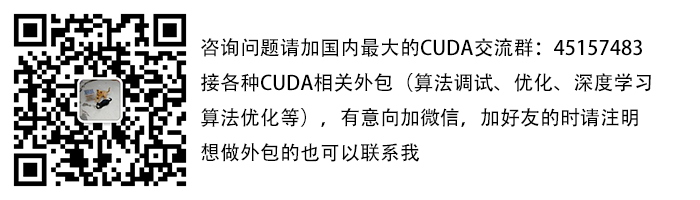
<style>
.page{position:relative;width:700px;height:200px;background:#ffffff}
.page>*{position:absolute;margin:0}
.t1{font:20px "AdobeHeitiStd-Regular";color:#000000}
</style>
<div class="page">
<p class="t1" style="left:201px;top:38px;width:450px;height:124px">咨询问题请加国内最大的CUDA交流群：45157483<br>接各种CUDA相关外包（算法调试、优化、深度学习<br>算法优化等），有意向加微信，加好友的时请注明<br>想做外包的也可以联系我</p>
</div>
